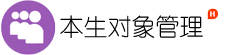
<style>
.page{position:relative;width:240px;height:55px;background:#ffffff}
.page>*{position:absolute;margin:0}
.t1{font:24px "YouYuan";color:#000000}
</style>
<div class="page">
<p class="t1" style="left:60px;top:15px;width:143px;height:23px">本生对象管理</p>
</div>
